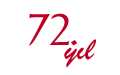
<style>
.page{position:relative;width:120px;height:75px;background:#ffffff}
.page>*{position:absolute;margin:0}
.t1{font:48.2px "BakerSignetBT-Roman";color:#be0027}
.t2{font:30.8px "BrushScriptBT";letter-spacing:0.001em;color:#be0027}
</style>
<div class="page">
<p class="t1" style="left:28px;top:13px;width:50px;height:33px">72.</p>
<p class="t2" style="left:64px;top:39px;width:32px;height:29px">yýl</p>
</div>
